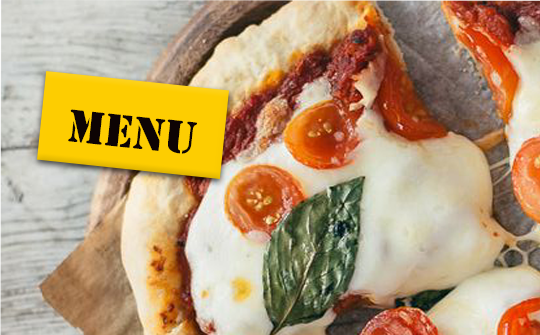
<style>
.page{position:relative;width:540px;height:335px}
.page>*{position:absolute;margin:0}
.t1{font:48px "Stencil";color:#0d0404}
</style>
<div class="page">
<p class="t1" style="left:68px;top:109px;width:129px;height:45px;rotate:6deg">Menu</p>
</div>
